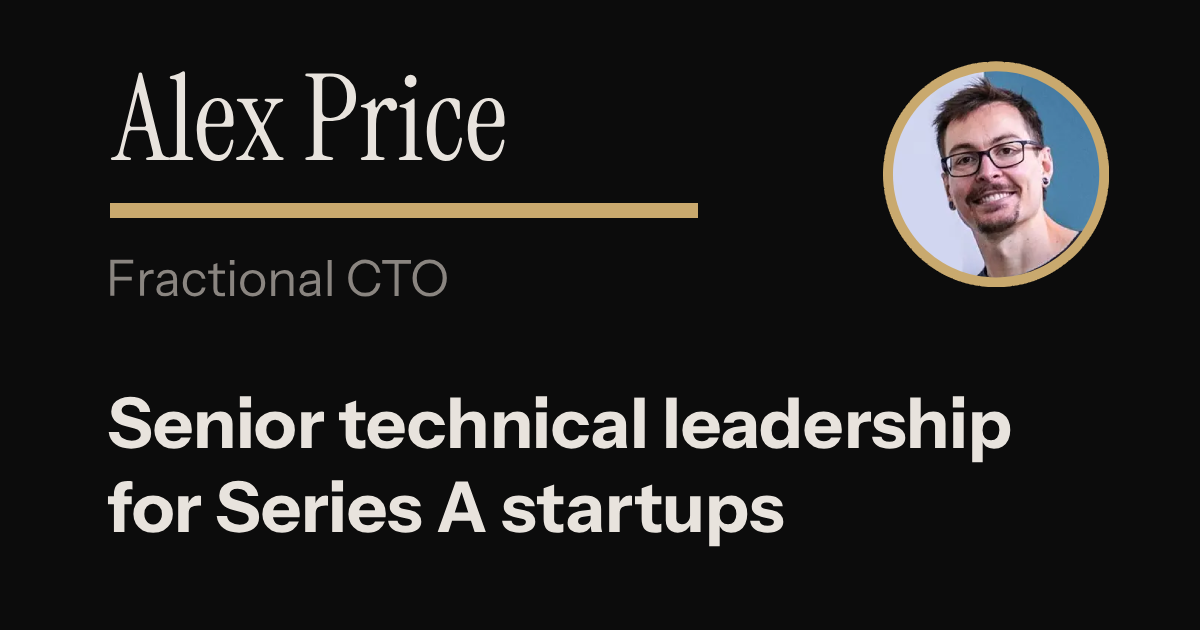
<style>
.page{position:relative;width:1200px;height:630px;background:#0c0c0c}
.page>*{position:absolute;margin:0}
.t1{font:120px "InstrumentSerif-Regular";color:#e8e3dd}
.t2{font:50px "InstrumentSans-Regular";color:#8a8580}
.t3{font:70px "InstrumentSans-Bold";color:#e8e3dd}
</style>
<div class="page">
<p class="t1" style="left:110px;top:71px;width:395px;height:91px">Alex Price</p>
<p class="t2" style="left:110px;top:259px;width:337px;height:38px">Fractional CTO</p>
<p class="t3" style="left:107px;top:396px;width:904px;height:151px">Senior technical leadership<br>for Series A startups</p>
</div>
